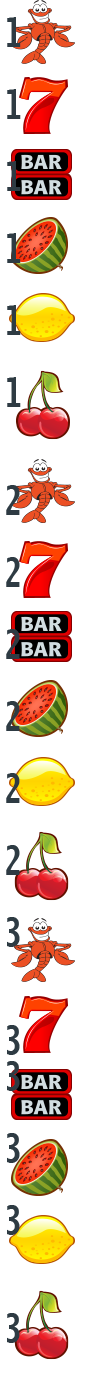
<style>
.page{position:relative;width:86px;height:1374px;background:#ffffff}
.page>*{position:absolute;margin:0}
.t1{font:40.5px "LucidaSans-TypewriterBold";color:#2e3b43;scale:0.74 1}
</style>
<div class="page">
<p class="t1" style="left:6px;top:17px;width:15px;height:1326px">1<br><br>1<br><br>1<br><br>1<br><br>1<br><br>1<br><br><br>2<br><br>2<br><br>2<br><br>2<br><br>2<br><br>2<br><br>3<br><br><br>3<br>3<br><br>3<br><br>3<br><br><br>3</p>
</div>
